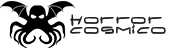
<style>
.page{position:relative;width:170px;height:49px;background:#ffffff}
.page>*{position:absolute;margin:0}
.t1{font:16.1px/10px "AtilAggRegular";letter-spacing:0.04em;color:#202020}
</style>
<div class="page">
<p class="t1" style="left:70px;top:14px;width:96px;height:21px">Horror<br>cosmico</p>
</div>
